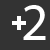
<style>
.page{position:relative;width:50px;height:50px;background:#333333}
.page>*{position:absolute;margin:0}
.t1{font:53.3px "MyriadPro-Regular";color:#ffffff}
</style>
<div class="page">
<p class="t1" style="left:23px;top:5px;width:23px;height:35px">2</p>
</div>
